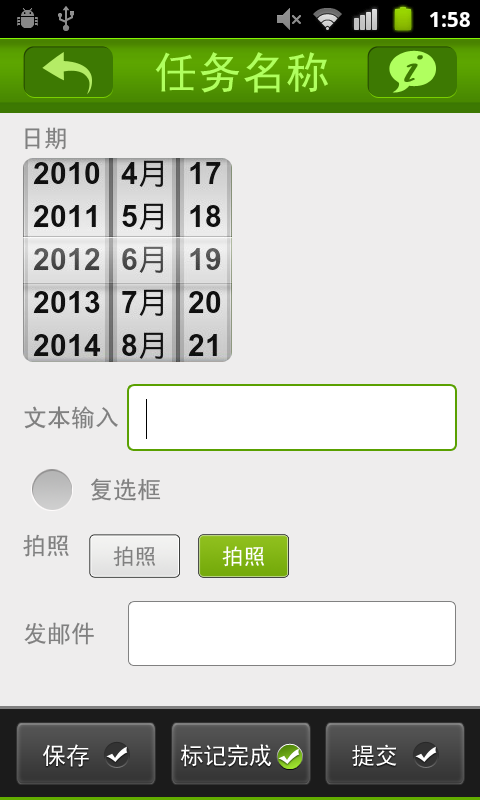
<style>
.page{position:relative;width:480px;height:800px;background:#eeeded}
.page>*{position:absolute;margin:0}
.t1{font:44px "SimHei";color:#b0ff5f}
.t2{font:46.3px "MonotypeCorsiva";color:#3d7902;font-weight:bold}
.t3{font:24px "SimHei";color:#808080}
.t4{font:22px "SimHei";color:#808080}
.t5{font:22px "SimHei";color:#ffffff}
.t6{font:24px "SimHei";color:#ffffff;text-transform:uppercase}
</style>
<div class="page">
<p class="t1" style="left:155px;top:52px;width:173px;height:41px">任务名称</p>
<p class="t2" style="left:404px;top:55px;width:19px;height:27px;rotate:16deg">i</p>
<p class="t3" style="left:25px;top:127px;width:41px;height:23px">日期</p>
<p class="t3" style="left:24px;top:406px;width:94px;height:23px">文本输入</p>
<p class="t3" style="left:91px;top:478px;width:70px;height:23px">复选框</p>
<p class="t3" style="left:23px;top:534px;width:46px;height:23px">拍照</p>
<p class="t4" style="left:113px;top:546px;width:43px;height:21px">拍照</p>
<p class="t5" style="left:222px;top:546px;width:43px;height:21px">拍照</p>
<p class="t3" style="left:24px;top:622px;width:70px;height:23px">发邮件</p>
<p class="t6" style="left:42px;top:744px;width:47px;height:23px">保存</p>
<p class="t6" style="left:180px;top:744px;width:92px;height:23px">标记完成</p>
<p class="t6" style="left:352px;top:744px;width:45px;height:23px">提交</p>
</div>
